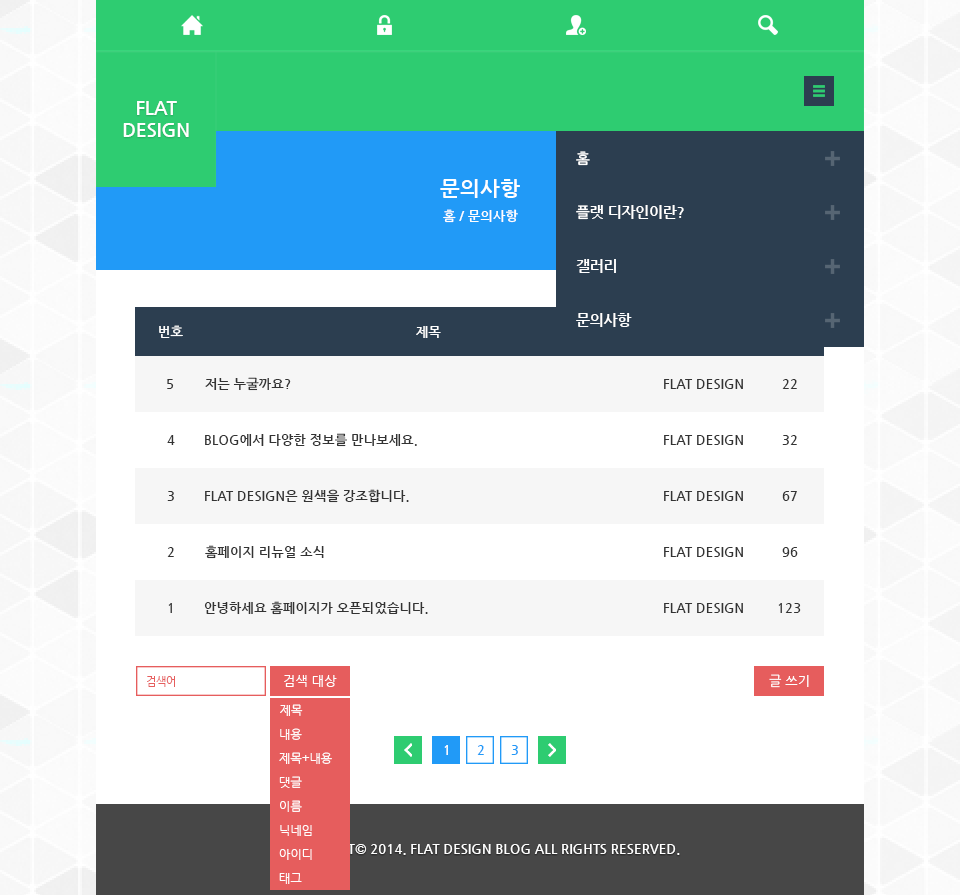
<style>
.page{position:relative;width:960px;height:895px;background:#ffffff}
.page>*{position:absolute;margin:0}
.t1{font:18.7px "NanumGothicBold";color:#ffffff}
.t2{font:14.7px "NanumGothicBold";color:#ffffff}
.t3{font:21.3px "NanumGothicBold";color:#ffffff}
.t4{font:13.3px "NanumGothicBold";color:#ffffff}
.t5{font:13.3px "NanumGothicBold";color:#fefefe}
.t6{font:13.3px "NanumGothicBold";color:#333333}
.t7{font:10.7px "NanumGothic";color:#e65d5d}
.t8{font:13.3px "NanumGothic";color:#ffffff}
.t9{font:12px "NanumGothic";color:#fffefe}
.t10{font:13.3px "NanumGothicBold";color:#219af7}
</style>
<div class="page">
<p class="t1" style="left:123px;top:101px;width:66px;height:36px;text-align:center">FLAT<br>DESIGN</p>
<p class="t2" style="left:576px;top:151px;width:14px;height:15px">홈</p>
<p class="t3" style="left:440px;top:179px;width:80px;height:19px">문의사항</p>
<p class="t4" style="left:443px;top:209px;width:75px;height:14px">홈 / 문의사항</p>
<p class="t2" style="left:576px;top:205px;width:108px;height:15px">플랫 디자인이란?</p>
<p class="t2" style="left:576px;top:259px;width:40px;height:14px">갤러리</p>
<p class="t2" style="left:576px;top:313px;width:56px;height:14px">문의사항</p>
<p class="t5" style="left:159px;top:325px;width:24px;height:13px">번호</p>
<p class="t5" style="left:416px;top:326px;width:25px;height:12px">제목</p>
<p class="t6" style="left:205px;top:377px;width:86px;height:14px">저는 누굴까요?</p>
<p class="t6" style="left:167px;top:379px;width:7px;height:10px">5</p>
<p class="t6" style="left:664px;top:379px;width:79px;height:10px">FLAT DESIGN</p>
<p class="t6" style="left:782px;top:379px;width:15px;height:10px">22</p>
<p class="t6" style="left:167px;top:435px;width:8px;height:10px">4</p>
<p class="t6" style="left:205px;top:433px;width:212px;height:14px">BLOG에서 다양한 정보를 만나보세요.</p>
<p class="t6" style="left:664px;top:435px;width:79px;height:10px">FLAT DESIGN</p>
<p class="t6" style="left:782px;top:435px;width:15px;height:10px">32</p>
<p class="t6" style="left:167px;top:491px;width:7px;height:10px">3</p>
<p class="t6" style="left:205px;top:489px;width:204px;height:14px">FLAT DESIGN은 원색을 강조합니다.</p>
<p class="t6" style="left:664px;top:491px;width:79px;height:10px">FLAT DESIGN</p>
<p class="t6" style="left:782px;top:491px;width:15px;height:10px">67</p>
<p class="t6" style="left:205px;top:545px;width:119px;height:14px">홈페이지 리뉴얼 소식</p>
<p class="t6" style="left:167px;top:547px;width:7px;height:10px">2</p>
<p class="t6" style="left:664px;top:547px;width:79px;height:10px">FLAT DESIGN</p>
<p class="t6" style="left:782px;top:547px;width:16px;height:10px">96</p>
<p class="t6" style="left:168px;top:603px;width:4px;height:10px">1</p>
<p class="t6" style="left:204px;top:601px;width:224px;height:14px">안녕하세요 홈페이지가 오픈되었습니다.</p>
<p class="t6" style="left:664px;top:603px;width:79px;height:10px">FLAT DESIGN</p>
<p class="t6" style="left:778px;top:603px;width:23px;height:10px">123</p>
<p class="t7" style="left:147px;top:676px;width:28px;height:11px">검색어</p>
<p class="t8" style="left:284px;top:675px;width:53px;height:12px">검색 대상</p>
<p class="t8" style="left:769px;top:674px;width:40px;height:14px">글 쓰기</p>
<p class="t9" style="left:280px;top:704px;width:23px;height:12px">제목</p>
<p class="t9" style="left:280px;top:728px;width:22px;height:12px">내용</p>
<p class="t4" style="left:444px;top:745px;width:4px;height:10px">1</p>
<p class="t10" style="left:477px;top:745px;width:7px;height:10px">2</p>
<p class="t10" style="left:511px;top:745px;width:7px;height:10px">3</p>
<p class="t9" style="left:279px;top:752px;width:53px;height:12px">제목+내용</p>
<p class="t9" style="left:279px;top:776px;width:23px;height:12px">댓글</p>
<p class="t9" style="left:280px;top:800px;width:22px;height:12px">이름</p>
<p class="t9" style="left:280px;top:825px;width:32px;height:11px">닉네임</p>
<p class="t4" style="left:280px;top:844px;width:400px;height:11px">COPYRIGHT© 2014. FLAT DESIGN BLOG ALL RIGHTS RESERVED.</p>
<p class="t9" style="left:279px;top:849px;width:33px;height:11px">아이디</p>
<p class="t9" style="left:279px;top:873px;width:23px;height:11px">태그</p>
</div>
